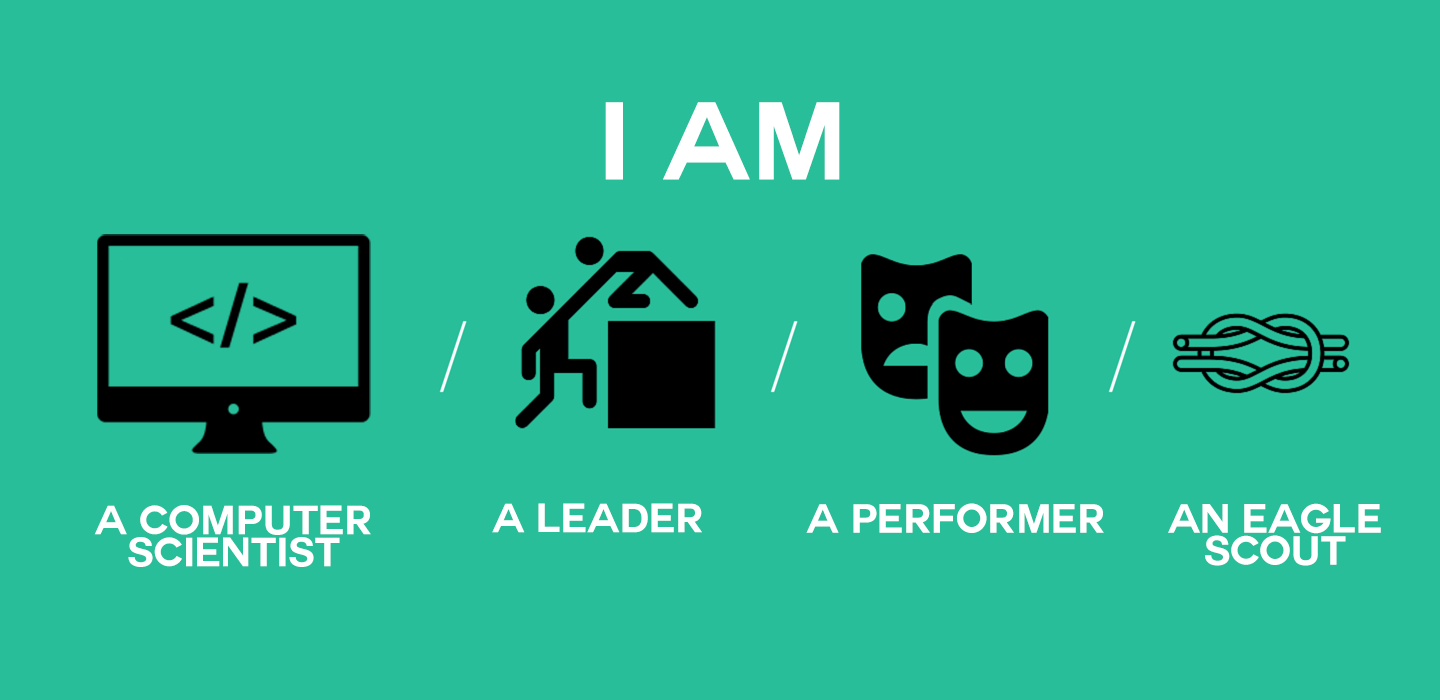
<style>
.page{position:relative;width:1440px;height:700px;background:#28be9a}
.page>*{position:absolute;margin:0}
.t1{font:108px "COUTURE-Bold";color:#ffffff}
.t2{font:40px "COUTURE-Bold";color:#ffffff}
</style>
<div class="page">
<p class="t1" style="left:605px;top:102px;width:235px;height:78px">I AM</p>
<p class="t2" style="left:94px;top:505px;width:277px;height:62px">A COMPUTER SCIENTIST</p>
<p class="t2" style="left:492px;top:503px;width:210px;height:30px">A leader</p>
<p class="t2" style="left:806px;top:503px;width:298px;height:30px">A performER</p>
<p class="t2" style="left:1168px;top:503px;width:213px;height:63px">an eagle scout</p>
</div>
